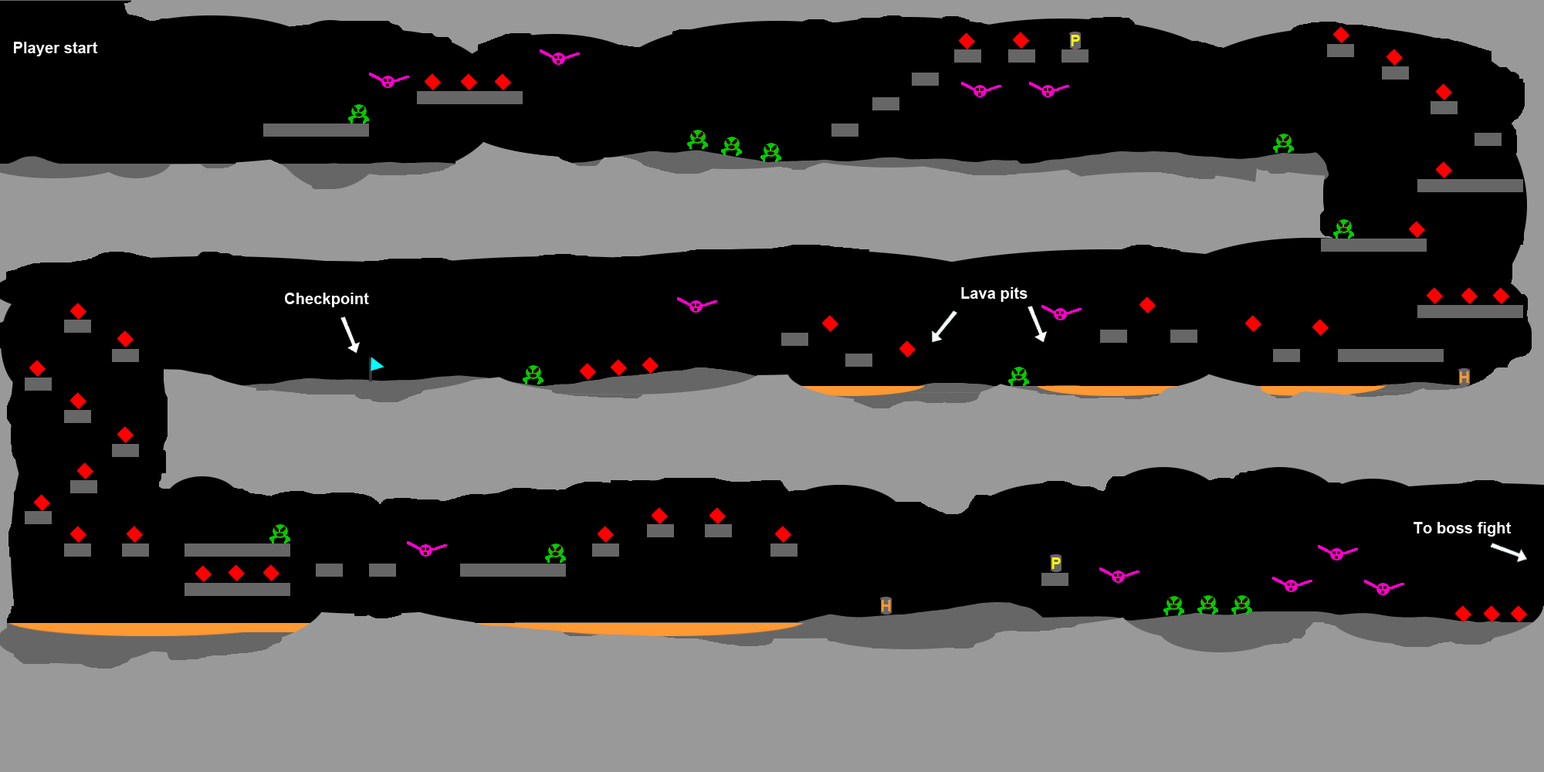
<style>
.page{position:relative;width:1544px;height:772px;background:#000000}
.page>*{position:absolute;margin:0}
.t1{font:15.6px "Arial-BoldMT";color:#ffffff}
</style>
<div class="page">
<p class="t1" style="left:14px;top:42px;width:84px;height:14px">Player start</p>
<p class="t1" style="left:285px;top:293px;width:84px;height:14px">Checkpoint</p>
<p class="t1" style="left:961px;top:287px;width:67px;height:15px">Lava pits</p>
<p class="t1" style="left:1414px;top:522px;width:98px;height:15px">To boss fight</p>
</div>
